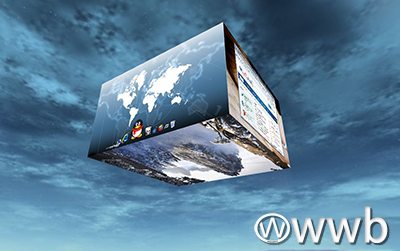
<style>
.page{position:relative;width:400px;height:251px}
.page>*{position:absolute;margin:0}
.t1{font:44.7px "AdobeHeitiStd-Regular";color:#ffffff}
</style>
<div class="page">
<p class="t1" style="left:290px;top:206px;width:98px;height:37px">wwb</p>
</div>
